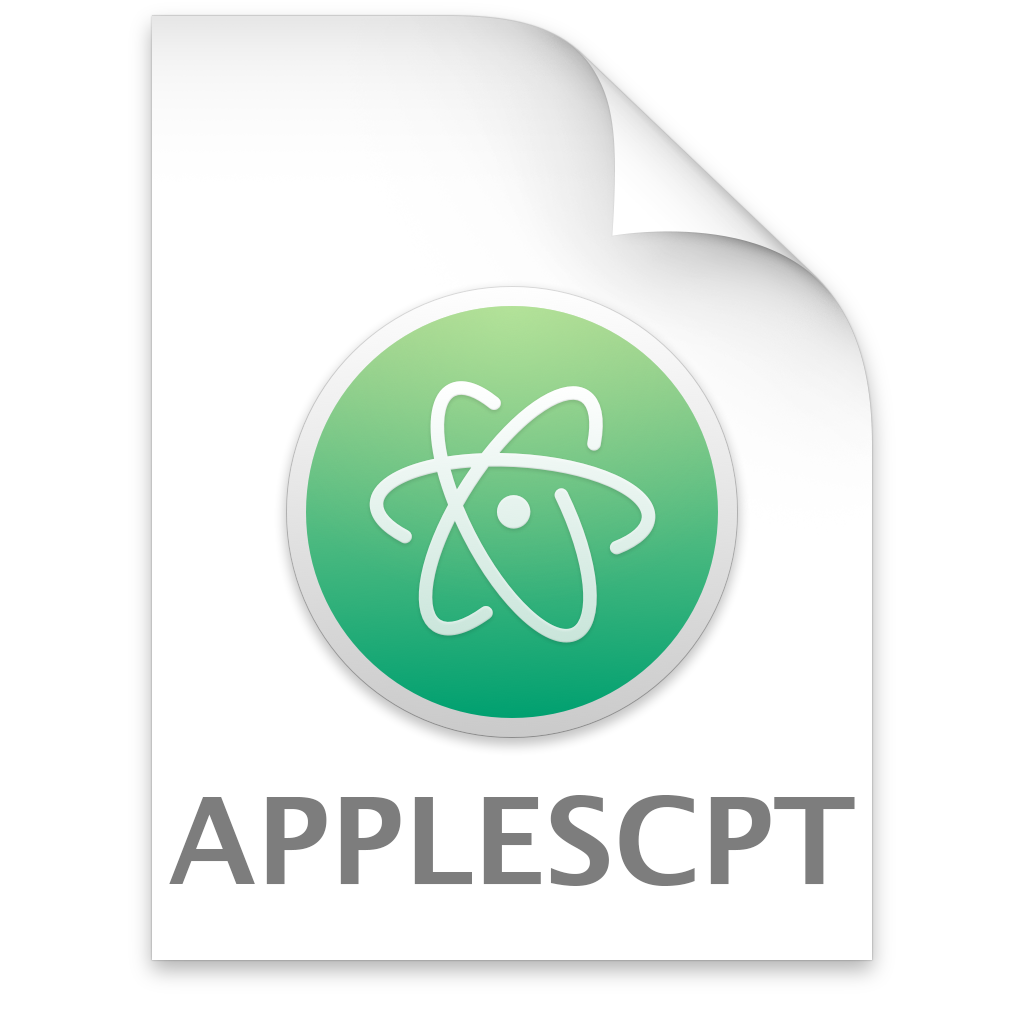
<style>
.page{position:relative;width:1024px;height:1024px;background:#ffffff}
.page>*{position:absolute;margin:0}
.t1{font:120px "LucidaGrande-Bold";color:#7d7d7d}
</style>
<div class="page">
<p class="t1" style="left:169px;top:795px;width:686px;height:91px">APPLESCPT</p>
</div>
